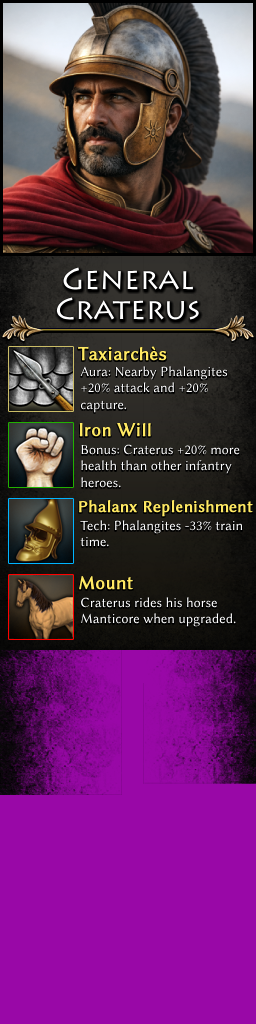
<style>
.page{position:relative;width:256px;height:1024px;background:#9908a7}
.page>*{position:absolute;margin:0}
.t1{font:30px/30px "Lithos";color:#ffffff}
.t2{font:19px "LinBiolinumO";color:#ffe963;font-weight:bold}
.t3{font:14px "LinBiolinumO";color:#ffffff}
.t4{font:17px "LinBiolinumO";color:#ffe963;font-weight:bold}
</style>
<div class="page">
<p class="t1" style="left:56px;top:267px;width:143px;height:53px;text-align:center">General<br>Craterus</p>
<p class="t2" style="left:78px;top:346px;width:89px;height:15px">Taxiarchès</p>
<p class="t3" style="left:80px;top:366px;width:148px;height:47px">Aura: Nearby Phalangites <br>+20% attack and +20% <br>capture.</p>
<p class="t2" style="left:79px;top:423px;width:72px;height:14px">Iron Will</p>
<p class="t3" style="left:81px;top:444px;width:159px;height:44px">Bonus: Craterus +20% more <br>health than other infantry <br>heroes.</p>
<p class="t4" style="left:79px;top:500px;width:174px;height:17px">Phalanx Replenishment</p>
<p class="t3" style="left:80px;top:520px;width:163px;height:27px">Tech: Phalangites -33% train<br>time.</p>
<p class="t2" style="left:79px;top:576px;width:54px;height:14px">Mount</p>
<p class="t3" style="left:81px;top:597px;width:155px;height:30px">Craterus rides his horse <br>Manticore when upgraded.</p>
</div>
